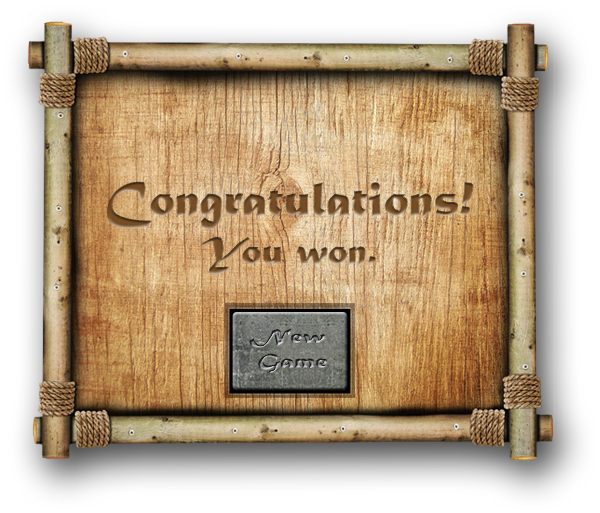
<style>
.page{position:relative;width:600px;height:513px}
.page>*{position:absolute;margin:0}
.t1{font:51.2px "MaturaMTScriptCapitals"}
.t2{font:40.3px "MaturaMTScriptCapitals"}
</style>
<div class="page">
<p class="t1" style="left:106px;top:181px;width:368px;height:94px;text-align:center">Congratulations!<br><span class="t2">You won.</span></p>
</div>
